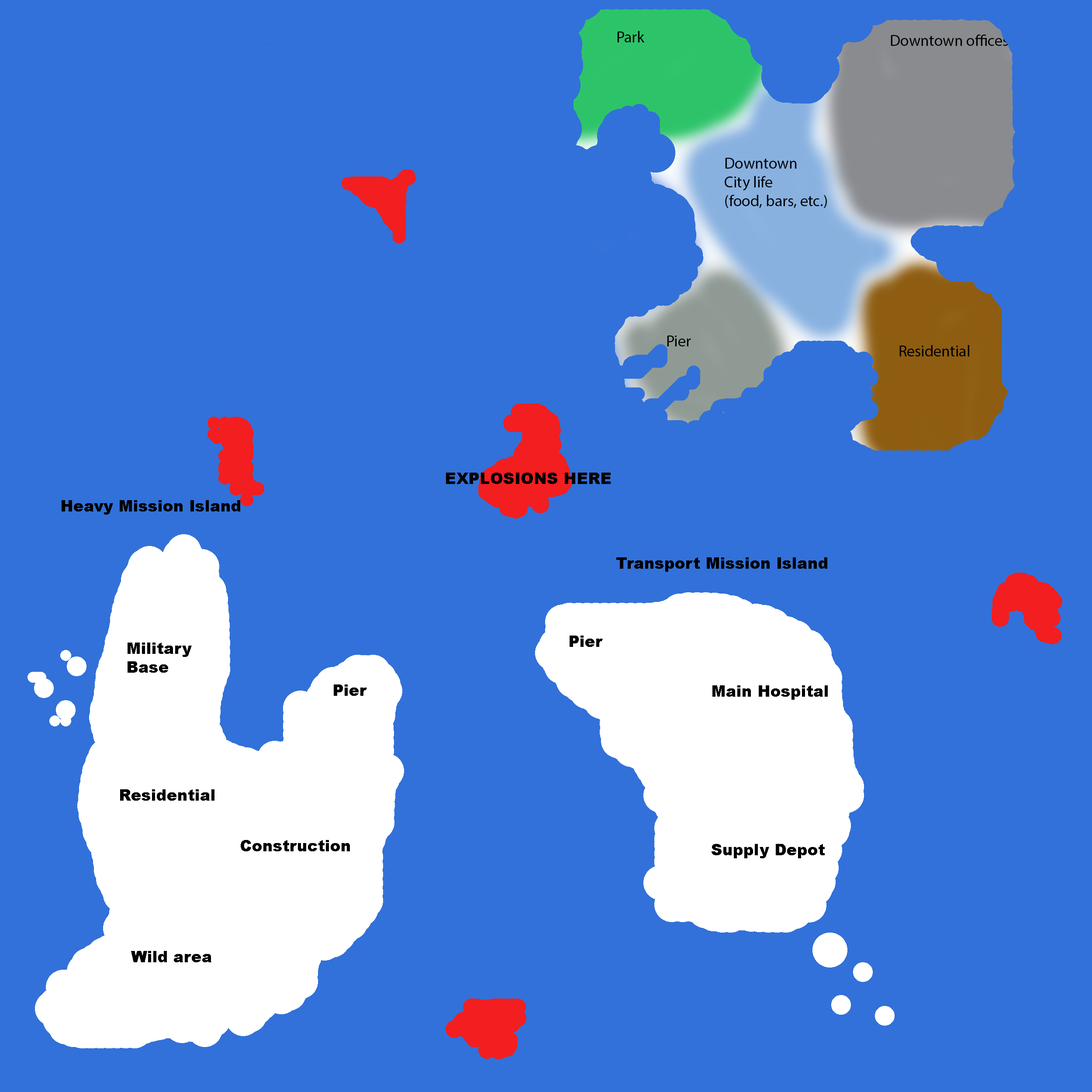
<style>
.page{position:relative;width:1092px;height:1092px;background:#3271d9}
.page>*{position:absolute;margin:0}
.t1{font:15.7px "Arial-Black";color:#000000}
</style>
<div class="page">
<p class="t1" style="left:446px;top:473px;width:165px;height:11px">EXPLOSIONS HERE</p>
<p class="t1" style="left:62px;top:500px;width:178px;height:15px">Heavy Mission Island</p>
<p class="t1" style="left:616px;top:557px;width:211px;height:15px">Transport Mission Island</p>
<p class="t1" style="left:570px;top:636px;width:33px;height:11px">Pier</p>
<p class="t1" style="left:128px;top:643px;width:64px;height:30px">Military <br>Base</p>
<p class="t1" style="left:334px;top:684px;width:33px;height:12px">Pier</p>
<p class="t1" style="left:712px;top:685px;width:116px;height:15px">Main Hospital</p>
<p class="t1" style="left:120px;top:789px;width:94px;height:12px">Residential</p>
<p class="t1" style="left:241px;top:840px;width:109px;height:11px">Construction</p>
<p class="t1" style="left:712px;top:844px;width:113px;height:14px">Supply Depot</p>
<p class="t1" style="left:131px;top:951px;width:80px;height:11px">Wild area</p>
</div>
